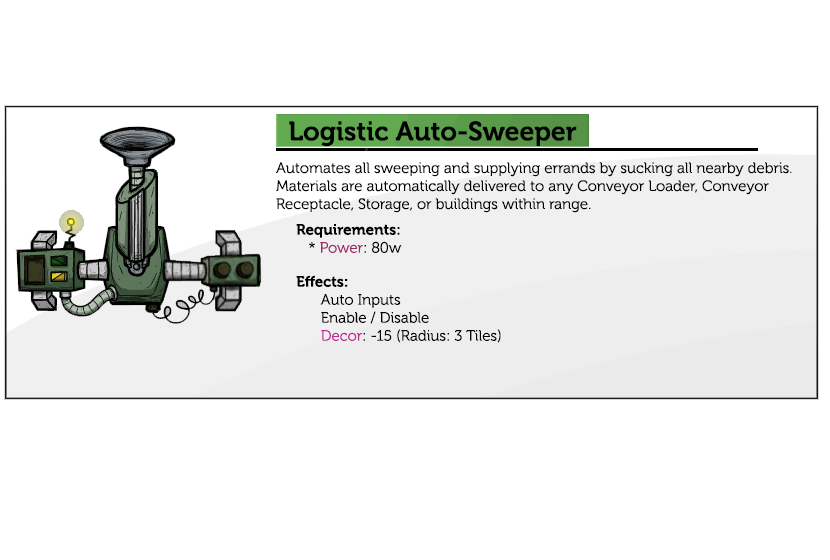
<style>
.page{position:relative;width:830px;height:560px;background:#ffffff}
.page>*{position:absolute;margin:0}
.t1{font:26.7px "Museo-700";color:#000000}
.t2{font:15px "Museo-300";color:#000000}
.t3{font:15px "Museo-700";color:#000000}
.t4{font:15px "Museo-300";color:#a12864}
.t5{font:15px "Museo-300";color:#bc2991}
</style>
<div class="page">
<p class="t1" style="left:289px;top:121px;width:288px;height:26px">Logistic Auto-Sweeper</p>
<p class="t2" style="left:276px;top:162px;width:516px;height:51px">Automates all sweeping and supplying errands by sucking all nearby debris. Materials are automatically delivered to any Conveyor Loader, Conveyor Receptacle, Storage, or buildings within range.</p>
<p class="t3" style="left:296px;top:224px;width:106px;height:29px">Requirements:<br><span class="t2">   * </span><span class="t4">Power</span><span class="t2">: 80w</span></p>
<p class="t2" style="left:296px;top:275px;width:205px;height:68px"><span class="t3">Effects:</span><br>      Auto Inputs<br>      Enable / Disable<br>      <span class="t5">Decor</span>: -15 (Radius: 3 Tiles)</p>
</div>
